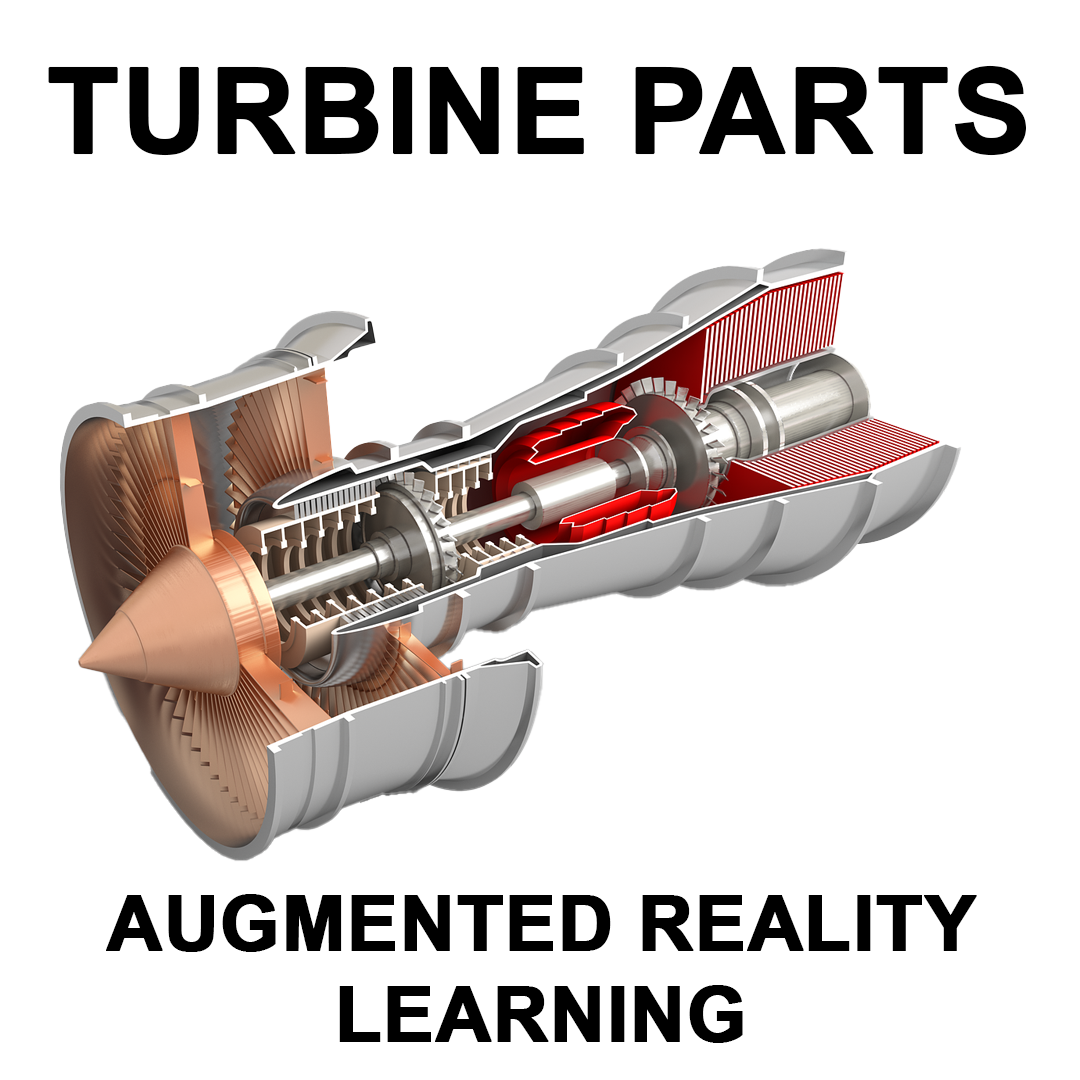
<style>
.page{position:relative;width:1080px;height:1080px;background:#ffffff}
.page>*{position:absolute;margin:0}
.t1{font:117.6px "Arial-BoldMT";color:#000000;font-weight:bold}
.t2{font:76px "Arial-BoldMT";color:#000000;font-weight:bold}
</style>
<div class="page">
<p class="t1" style="left:48px;top:65px;width:978px;height:91px">TURBINE PARTS</p>
<p class="t2" style="left:106px;top:894px;width:871px;height:149px;text-align:center">AUGMENTED REALITY<br>LEARNING</p>
</div>
